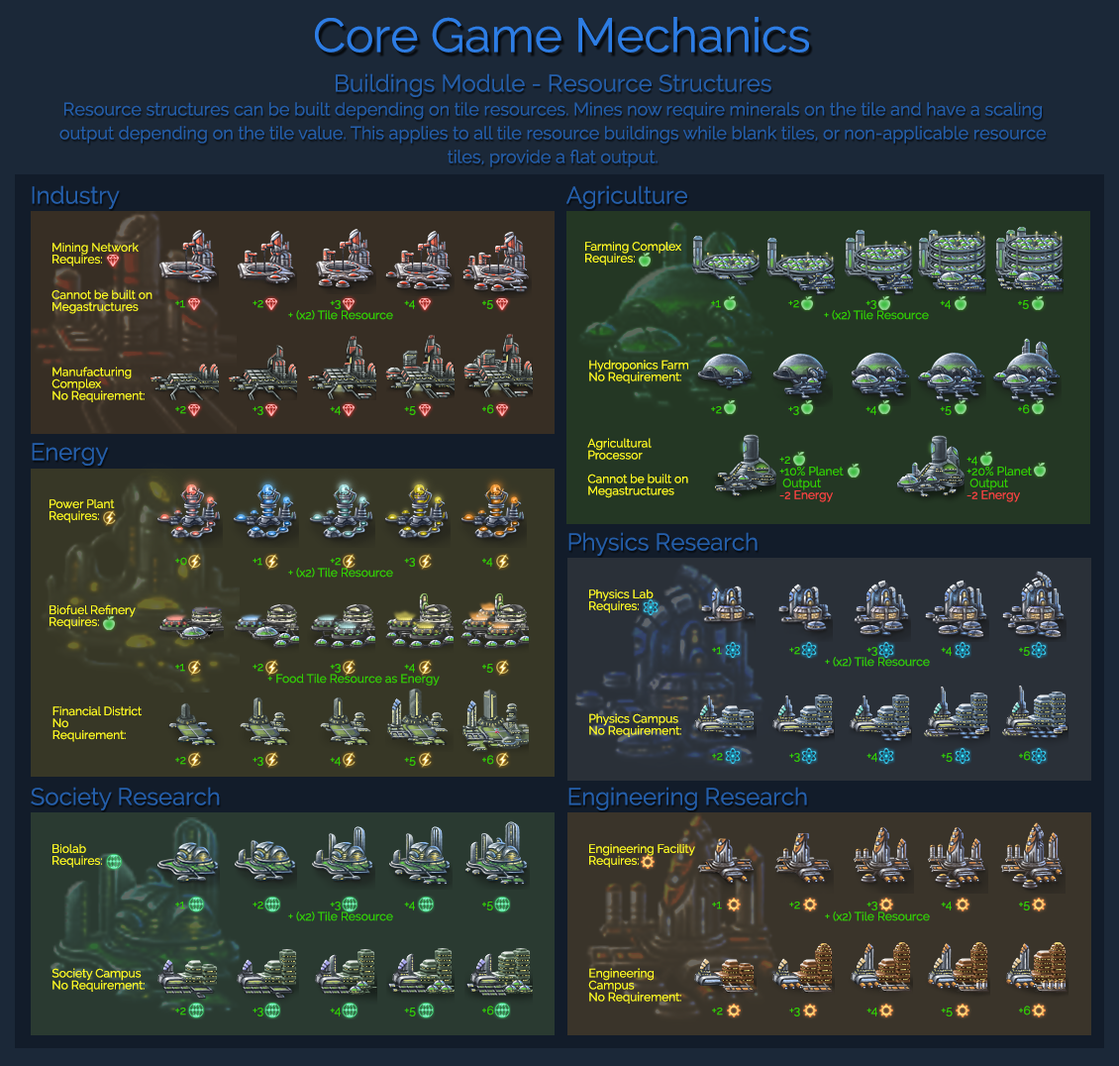
<style>
.page{position:relative;width:1119px;height:1066px}
.page>*{position:absolute;margin:0}
.t1{font:47.5px "Raleway";color:#2d7de4}
.t2{font:17.8px/11.9px "Raleway";color:#245ea9}
.t3{font:23.8px/11.9px "Raleway";color:#245ea9}
.t4{font:23.8px "Raleway";color:#245ea9}
.t5{font:11.9px/11.9px "Raleway";color:#fffc21}
.t6{font:11.9px/11.9px "Raleway";color:#31cf00}
.t7{font:11.9px "Raleway";color:#31cf00}
.t8{font:11.9px/11.9px "Raleway";color:#fb4343}
</style>
<div class="page">
<p class="t1" style="left:315px;top:17px;width:494px;height:35px">Core Game Mechanics</p>
<p class="t2" style="left:59px;top:73px;width:988px;height:94px;text-align:center"><span class="t3">Buildings Module - Resource Structures<br><br></span>Resource structures can be built depending on tile resources. Mines now require minerals on the tile and have a scaling <br><br>output depending on the tile value. This applies to all tile resource buildings while blank tiles, or non-applicable resource<br><br>tiles, provide a flat output.</p>
<p class="t4" style="left:32px;top:185px;width:88px;height:24px">Industry</p>
<p class="t4" style="left:566px;top:185px;width:121px;height:24px">Agriculture</p>
<p class="t5" style="left:51px;top:243px;width:102px;height:71px">Mining Network<br>Requires:<br><br><br>Cannot be built on <br>Megastructures</p>
<p class="t5" style="left:585px;top:242px;width:96px;height:23px">Farming Complex<br>Requires:</p>
<p class="t6" style="left:175px;top:300px;width:318px;height:20px">+1     +2       +3        +4          +5<br>      + (x2) Tile Resource</p>
<p class="t6" style="left:711px;top:300px;width:318px;height:20px">+1     +2       +3        +4          +5<br>      + (x2) Tile Resource</p>
<p class="t5" style="left:589px;top:359px;width:99px;height:24px">Hydroponics Farm<br>No Requirement:</p>
<p class="t5" style="left:51px;top:366px;width:94px;height:36px">Manufacturing<br>Complex<br>No Requirement:</p>
<p class="t7" style="left:175px;top:404px;width:319px;height:11px">+2     +3       +4        +5          +6</p>
<p class="t7" style="left:711px;top:404px;width:319px;height:11px">+2     +3       +4        +5          +6</p>
<p class="t5" style="left:587px;top:438px;width:101px;height:60px">Agricultural <br>Processor<br><br>Cannot be built on <br>Megastructures</p>
<p class="t4" style="left:32px;top:443px;width:76px;height:22px">Energy</p>
<p class="t6" style="left:779px;top:456px;width:65px;height:46px">+2<br>+10% Planet       <br> Output<br><span class="t8">-2 Energy</span></p>
<p class="t6" style="left:967px;top:456px;width:65px;height:46px">+4<br>+20% Planet       <br> Output<br><span class="t8">-2 Energy</span></p>
<p class="t5" style="left:50px;top:499px;width:65px;height:24px">Power Plant<br>Requires:</p>
<p class="t4" style="left:568px;top:532px;width:190px;height:24px">Physics Research</p>
<p class="t6" style="left:175px;top:557px;width:318px;height:20px">+0     +1       +2        +3          +4<br>      + (x2) Tile Resource</p>
<p class="t5" style="left:589px;top:589px;width:65px;height:24px">Physics Lab<br>Requires:</p>
<p class="t5" style="left:50px;top:604px;width:86px;height:25px">Biofuel Refinery<br>Requires:</p>
<p class="t6" style="left:712px;top:647px;width:318px;height:19px">+1     +2       +3        +4          +5<br>      + (x2) Tile Resource</p>
<p class="t6" style="left:175px;top:664px;width:318px;height:21px">+1     +2       +3        +4          +5<br>          + Food Tile Resource as Energy</p>
<p class="t5" style="left:52px;top:706px;width:90px;height:36px">Financial District<br>No <br>Requirement:</p>
<p class="t5" style="left:589px;top:713px;width:92px;height:24px">Physics Campus<br>No Requirement:</p>
<p class="t7" style="left:175px;top:755px;width:319px;height:11px">+2     +3       +4        +5          +6</p>
<p class="t7" style="left:712px;top:751px;width:319px;height:11px">+2     +3       +4        +5          +6</p>
<p class="t4" style="left:31px;top:786px;width:189px;height:24px">Society Research</p>
<p class="t4" style="left:568px;top:786px;width:239px;height:24px">Engineering Research</p>
<p class="t5" style="left:52px;top:844px;width:50px;height:24px">Biolab<br>Requires:</p>
<p class="t5" style="left:589px;top:844px;width:106px;height:24px">Engineering Facility<br>Requires:</p>
<p class="t6" style="left:175px;top:901px;width:318px;height:20px">+1     +2       +3        +4          +5<br>      + (x2) Tile Resource</p>
<p class="t6" style="left:712px;top:901px;width:318px;height:20px">+1     +2       +3        +4          +5<br>      + (x2) Tile Resource</p>
<p class="t5" style="left:51px;top:968px;width:94px;height:23px">Society Campus<br>No Requirement:</p>
<p class="t5" style="left:588px;top:968px;width:93px;height:35px">Engineering<br>Campus<br>No Requirement:</p>
<p class="t7" style="left:175px;top:1005px;width:319px;height:11px">+2     +3       +4        +5          +6</p>
<p class="t7" style="left:712px;top:1005px;width:319px;height:11px">+2     +3       +4        +5          +6</p>
</div>
